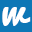
<style>
.page{position:relative;width:32px;height:32px;background:#0d77b6}
.page>*{position:absolute;margin:0}
.t1{font:40px "Pacifico";color:#ffffff}
</style>
<div class="page">
<p class="t1" style="left:2px;top:7px;width:29px;height:19px">w</p>
</div>
